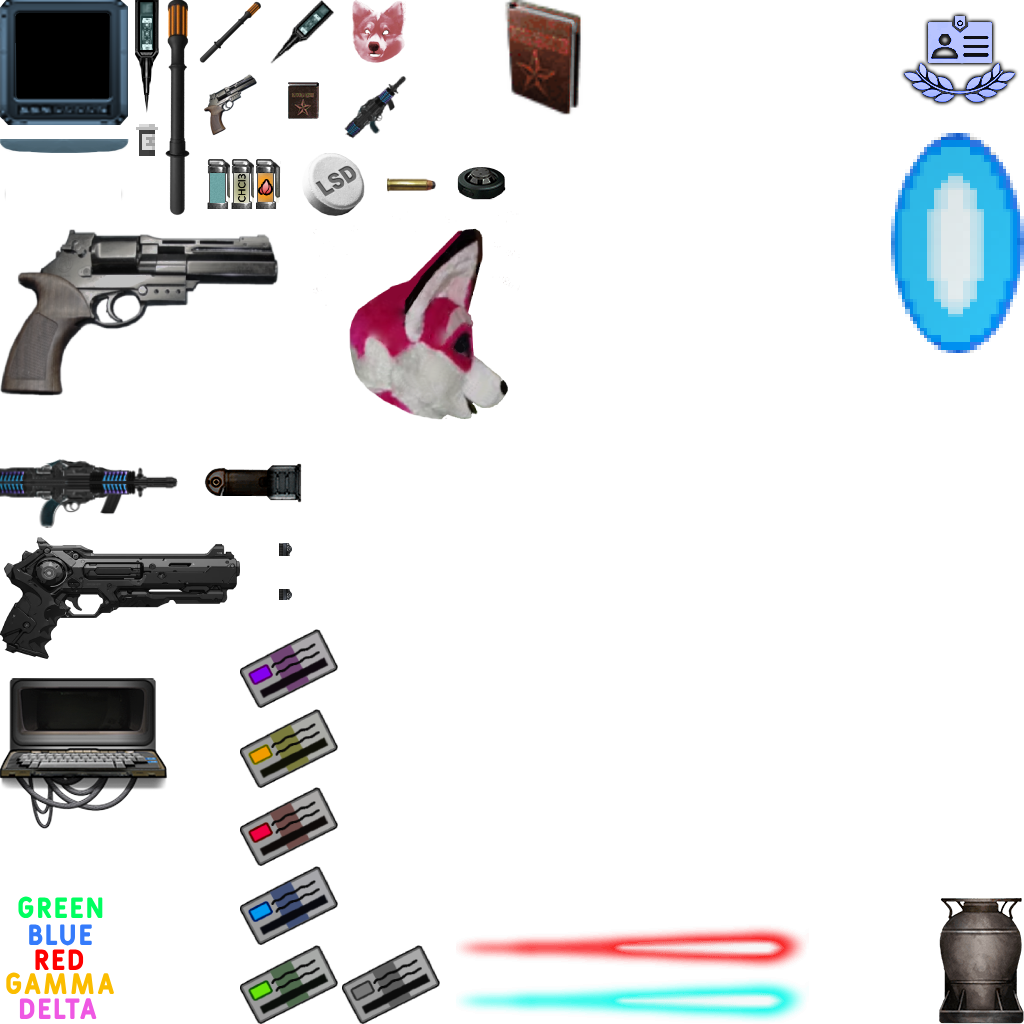
<style>
.page{position:relative;width:1024px;height:1024px;background:#ffffff}
.page>*{position:absolute;margin:0}
.t1{font:29.2px "Fulbo-Argenta";color:#00ff60}
.t2{font:29.2px "Fulbo-Argenta";color:#357bfb}
.t3{font:29.2px "Fulbo-Argenta";color:#ff0000}
.t4{font:29.2px "Fulbo-Argenta";color:#fbbd00}
.t5{font:29.2px "Fulbo-Argenta";color:#ef58e3}
</style>
<div class="page">
<p class="t1" style="left:18px;top:896px;width:85px;height:22px">GREEN</p>
<p class="t2" style="left:29px;top:924px;width:63px;height:22px">BLUE</p>
<p class="t3" style="left:35px;top:949px;width:49px;height:21px">RED</p>
<p class="t4" style="left:6px;top:972px;width:108px;height:23px">GAMMA</p>
<p class="t5" style="left:19px;top:998px;width:78px;height:21px">DELTA</p>
</div>
